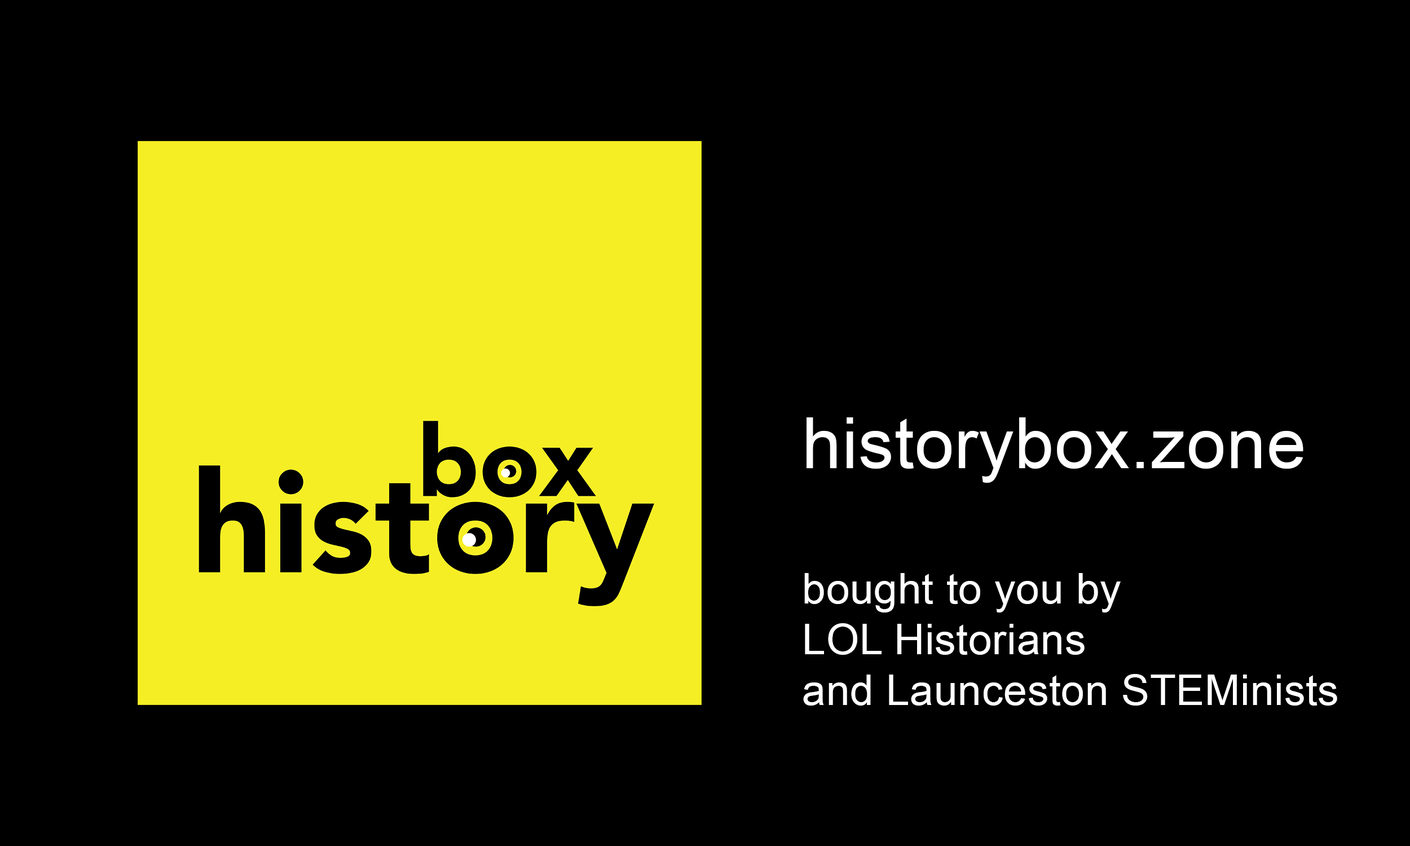
<style>
.page{position:relative;width:1410px;height:846px;background:#000000}
.page>*{position:absolute;margin:0}
.t1{font:42.3px "ArialMT";letter-spacing:0.01em;color:#ffffff}
.t2{font:70.5px "ArialMT";letter-spacing:0.01em;color:#ffffff}
</style>
<div class="page">
<p class="t1" style="left:803px;top:417px;width:534px;height:288px"><span class="t2">historybox.zone<br><br></span>bought to you by<br>LOL Historians<br>and Launceston STEMinists</p>
</div>
